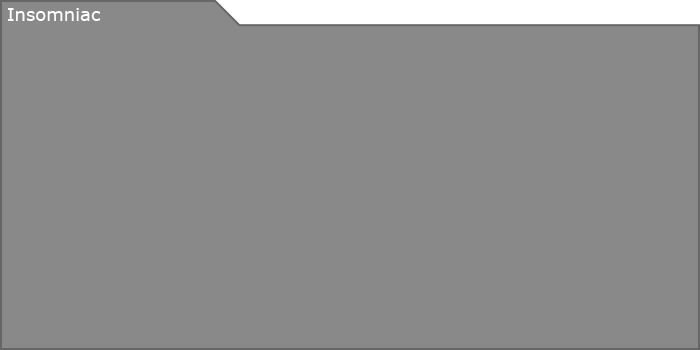
<style>
.page{position:relative;width:700px;height:350px;background:#898989}
.page>*{position:absolute;margin:0}
.t1{font:18px "Verdana";color:#ffffff}
</style>
<div class="page">
<p class="t1" style="left:8px;top:8px;width:92px;height:13px">Insomniac</p>
</div>
